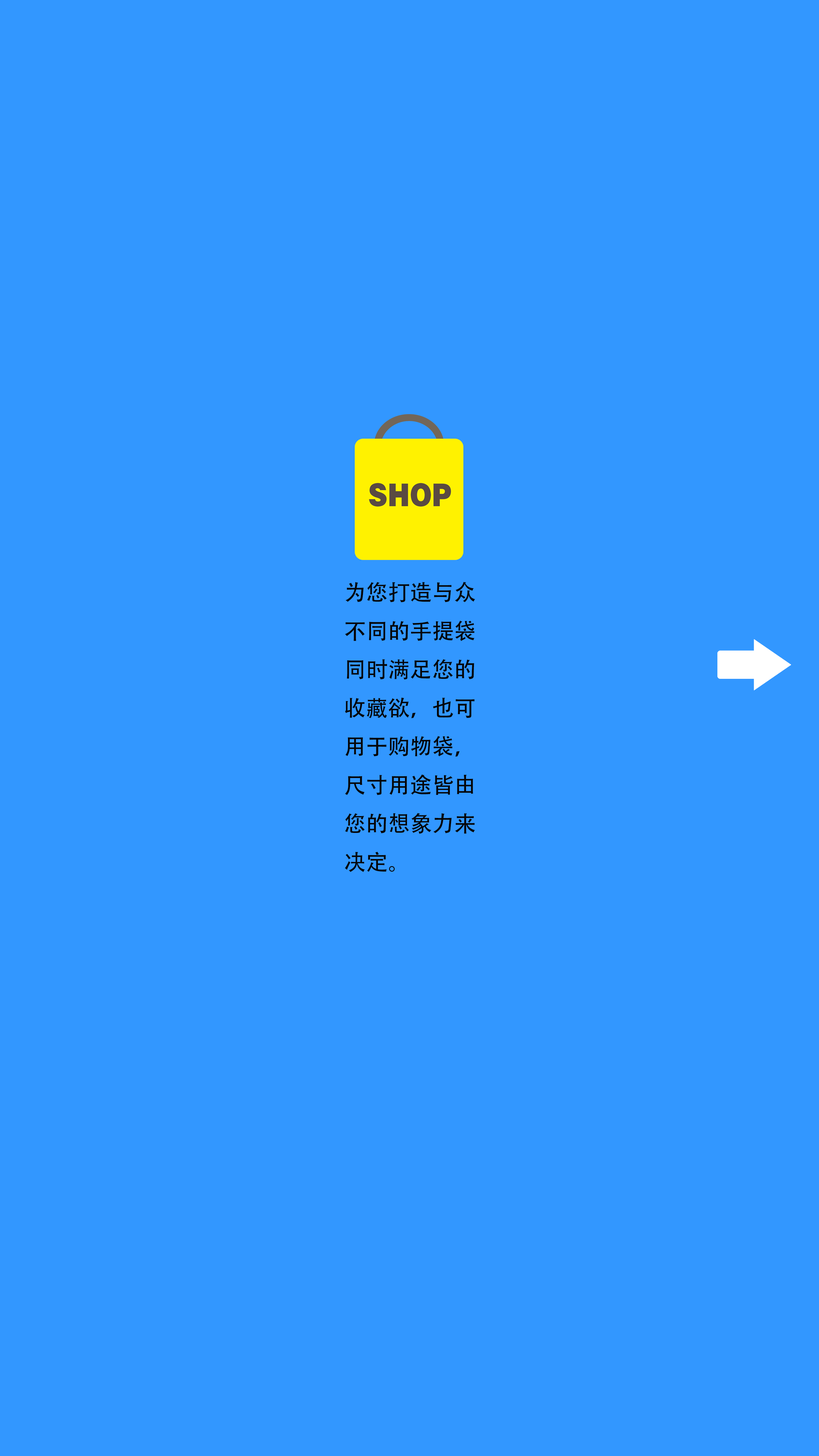
<style>
.page{position:relative;width:819px;height:1456px;background:#3297ff}
.page>*{position:absolute;margin:0}
.t1{font:22px "AdobeHeitiStd-Regular";color:#050505}
</style>
<div class="page">
<p class="t1" style="left:345px;top:582px;width:130px;height:290px">为您打造与众<br>不同的手提袋<br>同时满足您的<br>收藏欲，也可<br>用于购物袋，<br>尺寸用途皆由<br>您的想象力来<br>决定。</p>
</div>
